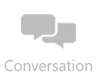
<style>
.page{position:relative;width:96px;height:80px;background:#ffffff}
.page>*{position:absolute;margin:0}
.t1{font:15.4px "SegoeUI";color:#bdbdbd}
</style>
<div class="page">
<p class="t1" style="left:4px;top:59px;width:89px;height:13px">Conversation</p>
</div>
